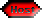
<style>
.page{position:relative;width:42px;height:18px;background:#ffffff}
.page>*{position:absolute;margin:0}
.t1{font:10px "LucidaSansUnicode";font-weight:bold}
</style>
<div class="page">
<p class="t1" style="left:11px;top:6px;width:24px;height:7px">Host</p>
</div>
